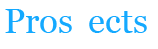
<style>
.page{position:relative;width:158px;height:49px;background:#ffffff}
.page>*{position:absolute;margin:0}
.t1{font:34.8px "Georgia";color:#14a9ff}
.t2{font:34.8px "OldEnglishTextMT";color:#ffffff}
</style>
<div class="page">
<p class="t1" style="left:5px;top:9px;width:142px;height:29px">Pros<span class="t2">p</span>ects</p>
</div>
